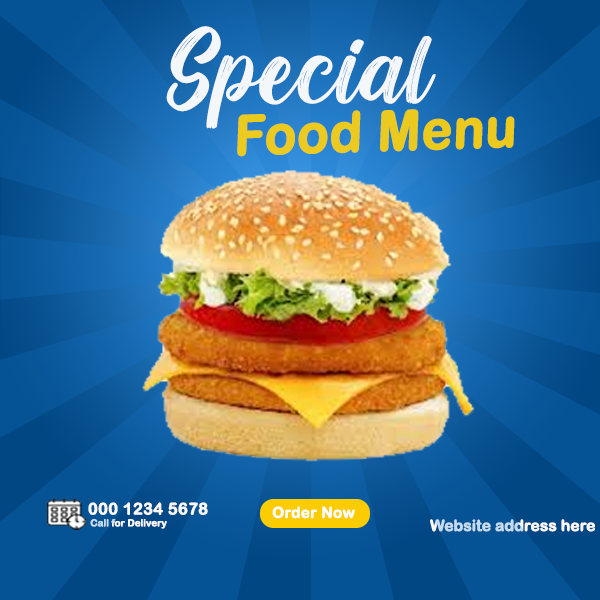
<style>
.page{position:relative;width:600px;height:600px}
.page>*{position:absolute;margin:0}
.t1{font:100.8px "BlackoutRegular";color:#f4f7fa}
.t2{font:55px "ArialRoundedMTBold";color:#f0cc14;font-weight:bold;scale:0.94 1}
.t3{font:16.3px "ArialRoundedMTBold";color:#fafafa;font-weight:bold}
.t4{font:15px "ArialRoundedMTBold";color:#fcfcfc;font-weight:bold}
.t5{font:9.8px "ArialRoundedMTBold";letter-spacing:-0.02em;color:#fafafa;font-weight:bold}
.t6{font:15.5px "ArialRoundedMTBold";letter-spacing:-0.02em;font-weight:bold}
</style>
<div class="page">
<p class="t1" style="left:166px;top:26px;width:270px;height:103px">Special</p>
<p class="t2" style="left:237px;top:109px;width:278px;height:48px;rotate:-2deg;opacity:0.97">Food Menu</p>
<p class="t3" style="left:88px;top:502px;width:120px;height:13px">000 1234 5678</p>
<p class="t4" style="left:272px;top:506px;width:83px;height:13px">Order Now</p>
<p class="t5" style="left:90px;top:519px;width:77px;height:10px">Call for Delivery</p>
<p class="t6" style="left:430px;top:519px;width:165px;height:13px">Website address here</p>
</div>
